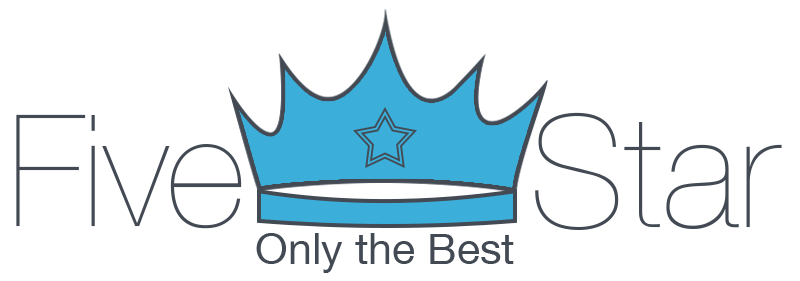
<style>
.page{position:relative;width:800px;height:281px;background:#ffffff}
.page>*{position:absolute;margin:0}
.t1{font:156px "HelveticaNeue-UltraLight";color:#434a54}
.t2{font:43px "HelveticaNeue";color:#434a54}
</style>
<div class="page">
<p class="t1" style="left:535px;top:112px;width:247px;height:118px">Star</p>
<p class="t1" style="left:16px;top:114px;width:226px;height:115px">Five</p>
<p class="t2" style="left:256px;top:233px;width:258px;height:40px">Only the Best</p>
</div>
